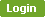
<style>
.page{position:relative;width:45px;height:17px;background:#71a62a}
.page>*{position:absolute;margin:0}
.t1{font:11px "Tahoma-Bold";color:#ffffff}
</style>
<div class="page">
<p class="t1" style="left:7px;top:4px;width:29px;height:10px">Login</p>
</div>
